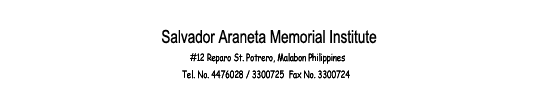
<style>
.page{position:relative;width:534px;height:105px;background:#ffffff}
.page>*{position:absolute;margin:0}
.t1{font:18px "ArialMT";color:#000000;scale:0.75 1}
.t2{font:10px "ComicSansMS";color:#000000;scale:0.75 1}
</style>
<div class="page">
<p class="t1" style="left:161px;top:29px;width:216px;height:15px">Salvador Araneta Memorial Institute</p>
<p class="t2" style="left:190px;top:53px;width:155px;height:11px">#12 Reparo St. Potrero, Malabon Philippines</p>
<p class="t2" style="left:182px;top:70px;width:168px;height:9px">Tel. No. 4476028 / 3300725  Fax No. 3300724</p>
</div>
